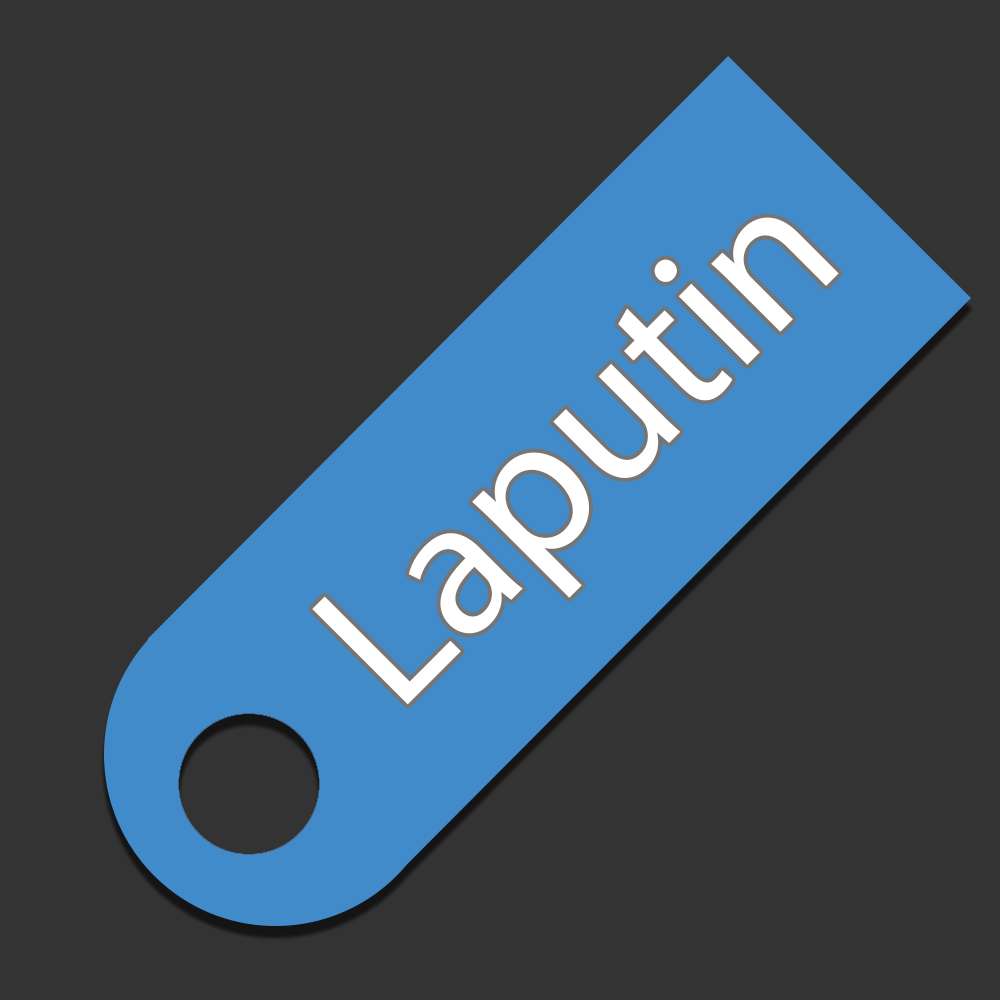
<style>
.page{position:relative;width:1000px;height:1000px;background:#333333}
.page>*{position:absolute;margin:0}
.t1{font:200px "MyriadPro-Regular";color:#ffffff}
</style>
<div class="page">
<p class="t1" style="left:312px;top:217px;width:527px;height:488px;rotate:-45deg">Laputin</p>
</div>
